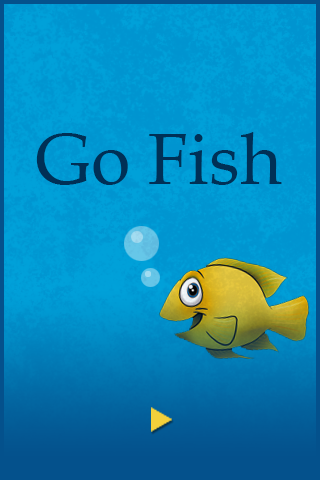
<style>
.page{position:relative;width:320px;height:480px}
.page>*{position:absolute;margin:0}
.t1{font:72px "BookAntiqua";color:#003056}
</style>
<div class="page">
<p class="t1" style="left:36px;top:132px;width:246px;height:53px">Go Fish</p>
</div>
